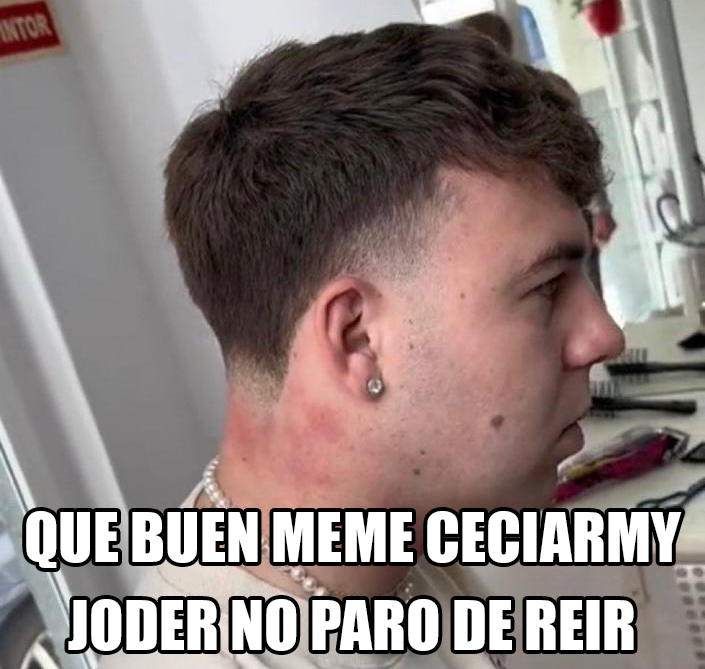
<style>
.page{position:relative;width:705px;height:669px}
.page>*{position:absolute;margin:0}
.t1{font:63.1px "Impact";color:#ffffff}
</style>
<div class="page">
<p class="t1" style="left:26px;top:511px;width:656px;height:140px;text-align:center">QUE BUEN MEME CECIARMY<br>JODER NO PARO DE REIR</p>
</div>
